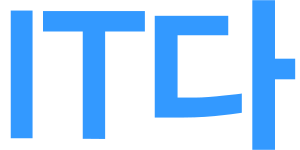
<style>
.page{position:relative;width:300px;height:150px;background:#ffffff}
.page>*{position:absolute;margin:0}
.t1{font:170px "YDYGO300-Bold";letter-spacing:-0.025em;color:#3399ff}
</style>
<div class="page">
<p class="t1" style="left:10px;top:0px;width:286px;height:150px">IT다</p>
</div>
